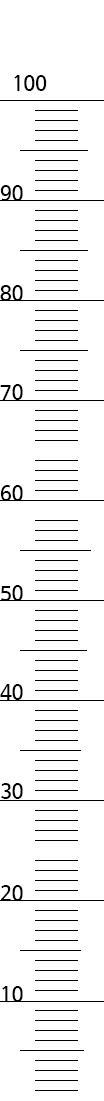
<style>
.page{position:relative;width:104px;height:1101px;background:#ffffff}
.page>*{position:absolute;margin:0}
.t1{font:20px "HancomGothicBold";color:#000000}
</style>
<div class="page">
<p class="t1" style="left:14px;top:75px;width:33px;height:16px">100</p>
<p class="t1" style="left:0px;top:185px;width:23px;height:16px">90</p>
<p class="t1" style="left:0px;top:285px;width:23px;height:16px">80</p>
<p class="t1" style="left:0px;top:384px;width:23px;height:16px">70</p>
<p class="t1" style="left:0px;top:485px;width:23px;height:16px">60</p>
<p class="t1" style="left:1px;top:585px;width:22px;height:16px">50</p>
<p class="t1" style="left:0px;top:684px;width:23px;height:16px">40</p>
<p class="t1" style="left:1px;top:783px;width:22px;height:16px">30</p>
<p class="t1" style="left:1px;top:885px;width:22px;height:16px">20</p>
<p class="t1" style="left:2px;top:986px;width:21px;height:16px">10</p>
</div>
